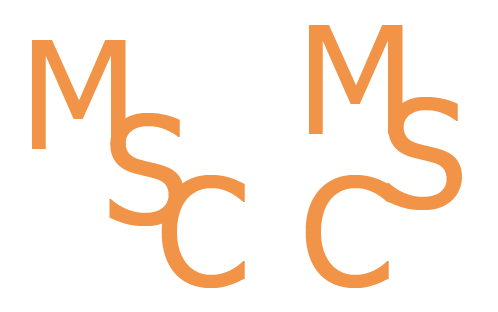
<style>
.page{position:relative;width:498px;height:312px;background:#ffffff}
.page>*{position:absolute;margin:0}
.t1{font:150px "Tahoma";color:#f29448}
</style>
<div class="page">
<p class="t1" style="left:309px;top:25px;width:94px;height:109px">M</p>
<p class="t1" style="left:32px;top:40px;width:94px;height:109px">M</p>
<p class="t1" style="left:387px;top:97px;width:75px;height:113px">S</p>
<p class="t1" style="left:109px;top:113px;width:75px;height:113px">S</p>
<p class="t1" style="left:161px;top:175px;width:84px;height:113px">C</p>
<p class="t1" style="left:305px;top:175px;width:84px;height:113px">C</p>
</div>
